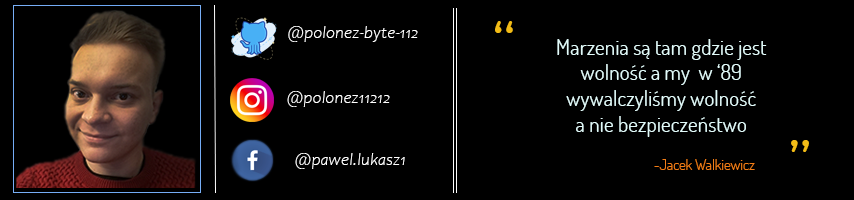
<style>
.page{position:relative;width:854px;height:200px;background:#000000}
.page>*{position:absolute;margin:0}
.t1{font:17.3px "Candara-LightItalic";color:#ffffff}
.t2{font:80px "Dosis-Light";color:#f2bc17}
.t3{font:21.3px "Dosis-Regular";color:#e2fbfa}
.t4{font:14.7px "Dosis-Light";color:#f27e17}
</style>
<div class="page">
<p class="t1" style="left:288px;top:26px;width:130px;height:16px">@polonez-byte-112</p>
<p class="t2" style="left:495px;top:21px;width:18px;height:12px">“</p>
<p class="t3" style="left:557px;top:39px;width:210px;height:98px;text-align:center">Marzenia są tam gdzie jest wolność a my  w ‘89 wywalczyliśmy wolność                                 a nie bezpieczeństwo</p>
<p class="t1" style="left:287px;top:91px;width:103px;height:16px">@polonez11212</p>
<p class="t2" style="left:791px;top:140px;width:18px;height:12px">”</p>
<p class="t1" style="left:295px;top:153px;width:110px;height:16px">@pawel.lukasz1</p>
<p class="t4" style="left:654px;top:159px;width:101px;height:11px">~Jacek Walkiewicz</p>
</div>
